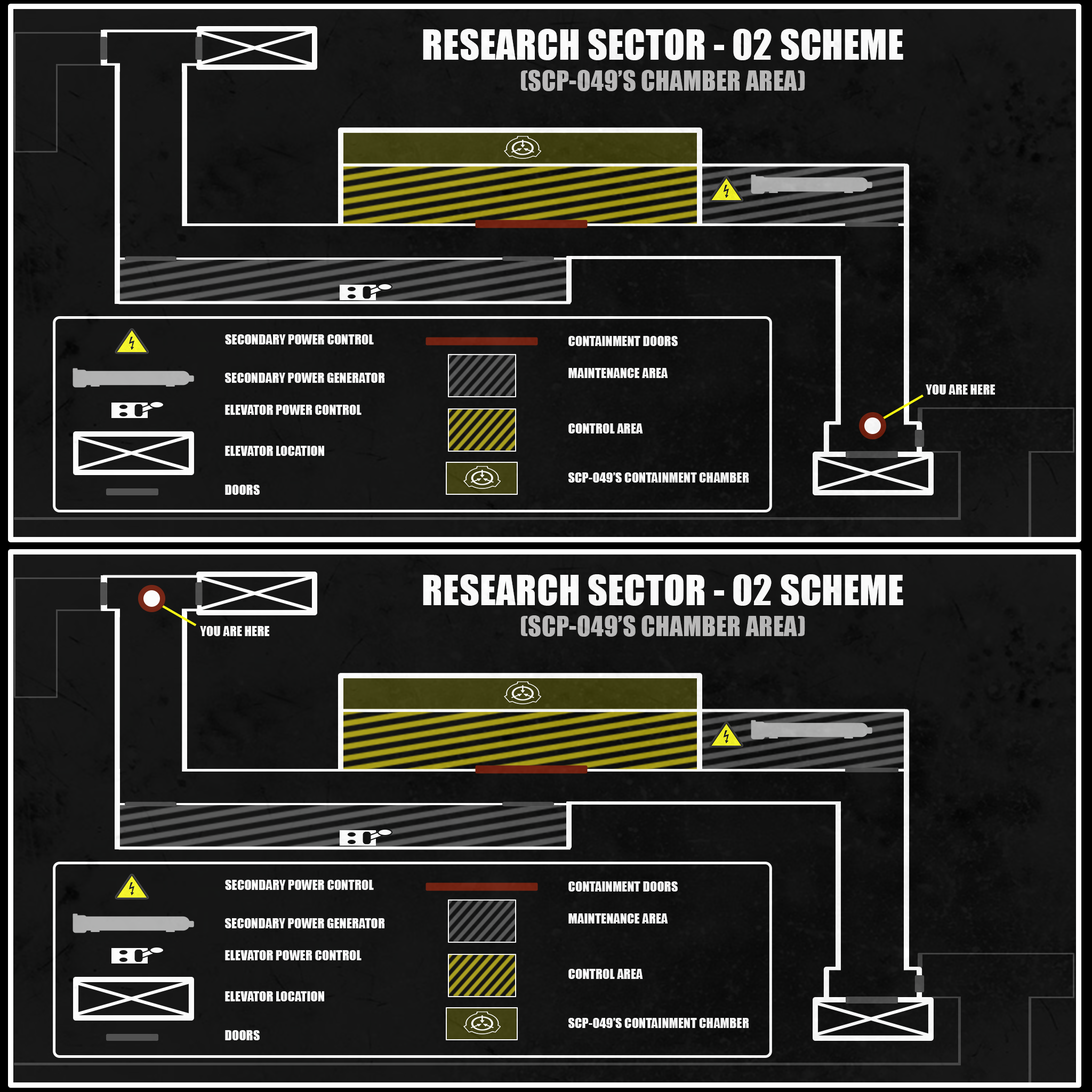
<style>
.page{position:relative;width:1092px;height:1092px}
.page>*{position:absolute;margin:0}
.t1{font:38.4px "Impact";letter-spacing:0.01em;color:#ffffff}
.t2{font:25.6px "Impact";letter-spacing:0.01em;color:#b7b6b6}
.t3{font:12.8px "Impact";letter-spacing:0.01em;color:#ffffff}
</style>
<div class="page">
<p class="t1" style="left:423px;top:29px;width:480px;height:62px;text-align:justify">RESEARCH SECTOR - 02 SCHEME<br><span class="t2">(SCP-049’S CHAMBER AREA)</span></p>
<p class="t3" style="left:225px;top:334px;width:149px;height:10px">SECONDARY POWER CONTROL</p>
<p class="t3" style="left:568px;top:336px;width:110px;height:10px">CONTAINMENT DOORS</p>
<p class="t3" style="left:225px;top:373px;width:159px;height:10px">SECONDARY POWER GENERATOR</p>
<p class="t3" style="left:568px;top:368px;width:100px;height:10px">MAINTENANCE AREA</p>
<p class="t3" style="left:926px;top:384px;width:69px;height:11px">YOU ARE HERE</p>
<p class="t3" style="left:225px;top:405px;width:137px;height:10px">ELEVATOR POWER CONTROL</p>
<p class="t3" style="left:568px;top:423px;width:75px;height:10px">CONTROL AREA</p>
<p class="t3" style="left:225px;top:446px;width:99px;height:10px">ELEVATOR LOCATION</p>
<p class="t3" style="left:568px;top:472px;width:181px;height:11px">SCP-049’S CONTAINMENT CHAMBER</p>
<p class="t3" style="left:225px;top:485px;width:35px;height:10px">DOORS</p>
<p class="t1" style="left:423px;top:574px;width:480px;height:63px;text-align:justify">RESEARCH SECTOR - 02 SCHEME<br><span class="t2">(SCP-049’S CHAMBER AREA)</span></p>
<p class="t3" style="left:200px;top:626px;width:69px;height:10px">YOU ARE HERE</p>
<p class="t3" style="left:225px;top:880px;width:149px;height:10px">SECONDARY POWER CONTROL</p>
<p class="t3" style="left:568px;top:881px;width:110px;height:11px">CONTAINMENT DOORS</p>
<p class="t3" style="left:568px;top:913px;width:100px;height:10px">MAINTENANCE AREA</p>
<p class="t3" style="left:225px;top:918px;width:159px;height:10px">SECONDARY POWER GENERATOR</p>
<p class="t3" style="left:225px;top:950px;width:137px;height:10px">ELEVATOR POWER CONTROL</p>
<p class="t3" style="left:568px;top:969px;width:75px;height:10px">CONTROL AREA</p>
<p class="t3" style="left:225px;top:991px;width:99px;height:10px">ELEVATOR LOCATION</p>
<p class="t3" style="left:568px;top:1018px;width:181px;height:10px">SCP-049’S CONTAINMENT CHAMBER</p>
<p class="t3" style="left:225px;top:1030px;width:35px;height:10px">DOORS</p>
</div>
